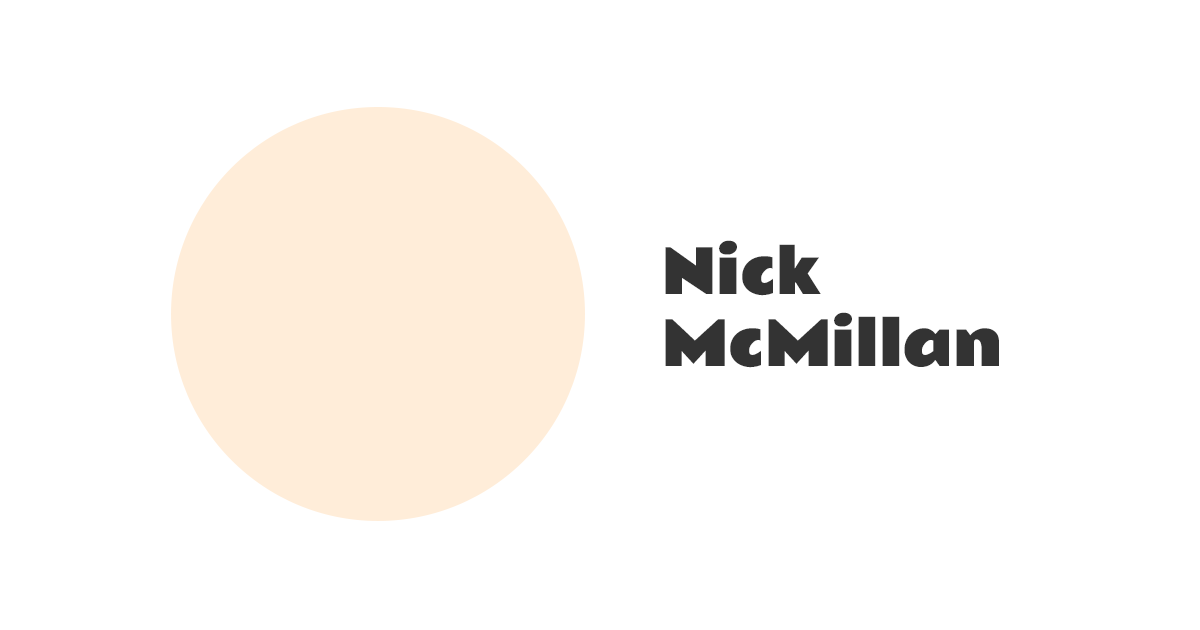
<style>
.page{position:relative;width:1200px;height:630px;background:#ffffff}
.page>*{position:absolute;margin:0}
.t1{font:60px "RammettoOne-Regular";color:#333333}
</style>
<div class="page">
<p class="t1" style="left:665px;top:240px;width:334px;height:128px">Nick<br>McMillan</p>
</div>
